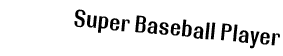
<style>
.page{position:relative;width:283px;height:56px;background:#ffffff}
.page>*{position:absolute;margin:0}
.t1{font:24px "RolloutPlain";color:#000000}
</style>
<div class="page">
<p class="t1" style="left:74px;top:9px;width:206px;height:40px;rotate:6deg">Super Baseball Player</p>
</div>
